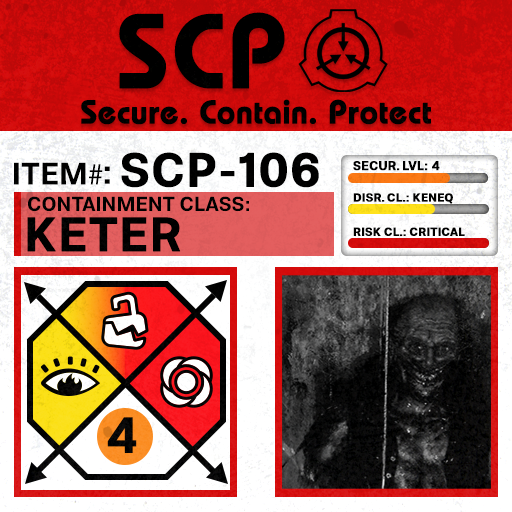
<style>
.page{position:relative;width:512px;height:512px}
.page>*{position:absolute;margin:0}
.t1{font:105.8px "BauhausLT-Demi";color:#000000;font-weight:bold}
.t2{font:33px "BauhausLT-Demi";color:#000000;font-weight:bold}
.t3{font:47.6px "Molde-Semibold";color:#000000;font-weight:bold}
.t4{font:12.5px "Molde-Semibold";color:#000000;font-weight:bold}
.t5{font:31.1px "Molde-Semibold";color:#000000}
.t6{font:31.1px "MyriadPro-Regular";color:#000000}
.t7{font:34.5px "Molde-Semibold";color:#000000}
.t8{font:20.3px "Molde-Semibold";color:#000000}
.t9{font:11.7px "Molde-Semibold";color:#000000;font-weight:bold}
.t10{font:47.8px "Molde-Semibold";color:#000000;font-weight:bold}
</style>
<div class="page">
<p class="t1" style="left:119px;top:12px;width:166px;height:77px">SCP</p>
<p class="t2" style="left:81px;top:99px;width:350px;height:26px">Secure. Contain. Protect</p>
<p class="t3" style="left:121px;top:152px;width:198px;height:36px">SCP-106</p>
<p class="t4" style="left:353px;top:161px;width:87px;height:10px">SECUR. LVL: 4</p>
<p class="t5" style="left:14px;top:162px;width:89px;height:23px">ITEM<span class="t6">#</span></p>
<p class="t7" style="left:104px;top:166px;width:6px;height:18px">:</p>
<p class="t8" style="left:28px;top:196px;width:221px;height:16px">CONTAINMENT CLASS:</p>
<p class="t9" style="left:353px;top:193px;width:100px;height:11px">DISR. CL.: KENEQ</p>
<p class="t10" style="left:27px;top:217px;width:154px;height:35px">KETER</p>
<p class="t9" style="left:353px;top:227px;width:112px;height:9px">RISK CL.: CRITICAL</p>
</div>
